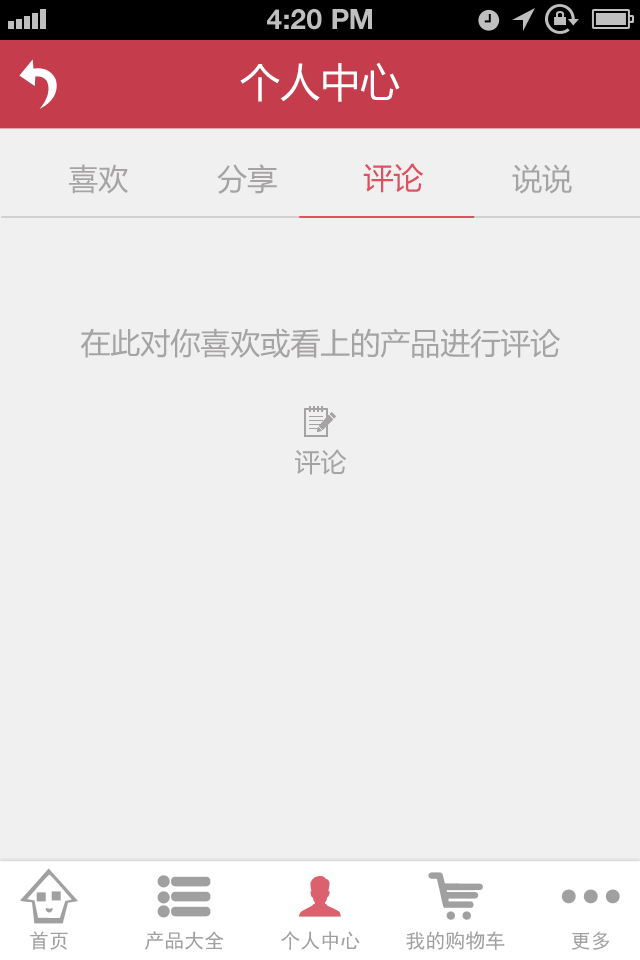
<style>
.page{position:relative;width:640px;height:960px;background:#f0f0f0}
.page>*{position:absolute;margin:0}
.t1{font:28px "HelveticaNeue-Bold";color:#bfbfbf;text-transform:uppercase}
.t2{font:40px "MicrosoftYaHei";color:#ffffff;text-transform:uppercase}
.t3{font:30px "MicrosoftYaHei";color:#a6a4a4;text-transform:uppercase}
.t4{font:30px "MicrosoftYaHei";color:#a5a3a3;text-transform:uppercase}
.t5{font:30px "MicrosoftYaHei";color:#dd5161;text-transform:uppercase}
.t6{font:30px "MicrosoftYaHei";color:#a5a3a3}
.t7{font:26px "MicrosoftYaHei";color:#a5a3a3;text-transform:uppercase}
.t8{font:20px "SimHei";color:#a0a0a0}
</style>
<div class="page">
<p class="t1" style="left:267px;top:9px;width:105px;height:21px">4:20 PM</p>
<p class="t2" style="left:240px;top:62px;width:160px;height:40px">个人中心</p>
<p class="t3" style="left:69px;top:164px;width:59px;height:30px">喜欢</p>
<p class="t4" style="left:217px;top:164px;width:60px;height:30px">分享</p>
<p class="t5" style="left:363px;top:163px;width:60px;height:30px">评论</p>
<p class="t4" style="left:512px;top:164px;width:60px;height:30px">说说</p>
<p class="t6" style="left:80px;top:328px;width:480px;height:30px">在此对你喜欢或看上的产品进行评论</p>
<p class="t7" style="left:295px;top:449px;width:52px;height:26px">评论</p>
<p class="t8" style="left:30px;top:931px;width:38px;height:19px">首页</p>
<p class="t8" style="left:145px;top:931px;width:79px;height:19px">产品大全</p>
<p class="t8" style="left:281px;top:931px;width:79px;height:19px">个人中心</p>
<p class="t8" style="left:406px;top:931px;width:99px;height:19px">我的购物车</p>
<p class="t8" style="left:572px;top:931px;width:38px;height:19px">更多</p>
</div>
